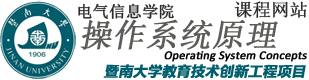
<style>
.page{position:relative;width:309px;height:80px;background:#ffffff}
.page>*{position:absolute;margin:0}
.t1{font:16px "SimSun";color:#2d2d2c;font-weight:bold}
.t2{font:18px "SimSun";color:#2d2d2c;font-weight:bold}
.t3{font:32px "SimSun";color:#5c5c59;font-weight:bold;font-style:italic}
.t4{font:12px "Calibri";color:#010101;font-weight:bold;font-style:italic}
.t5{font:14px "MicrosoftYaHei-Bold";color:#005d6c;font-weight:bold;font-style:italic}
</style>
<div class="page">
<p class="t1" style="left:78px;top:3px;width:96px;height:16px">电气信息学院</p>
<p class="t2" style="left:234px;top:1px;width:73px;height:17px">课程网站</p>
<p class="t3" style="left:80px;top:19px;width:198px;height:31px">操作系统原理</p>
<p class="t4" style="left:164px;top:51px;width:143px;height:11px">Operating System Concepts</p>
<p class="t5" style="left:103px;top:64px;width:203px;height:15px">暨南大学教育技术创新工程项目</p>
</div>
